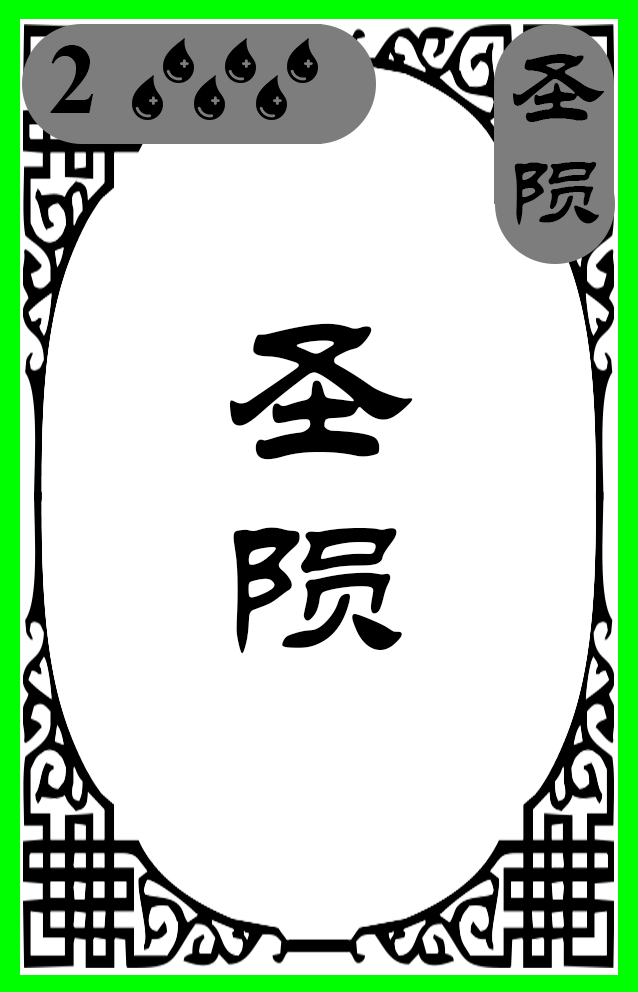
<style>
.page{position:relative;width:638px;height:992px;background:#ffffff}
.page>*{position:absolute;margin:0}
.t1{font:100px "TimesNewRomanPS-BoldMT";color:#000000}
.t2{font:100px "STLiti";color:#000000}
.t3{font:200px "STLiti";color:#000000}
</style>
<div class="page">
<p class="t1" style="left:50px;top:45px;width:43px;height:68px">2</p>
<p class="t2" style="left:513px;top:54px;width:91px;height:171px;text-align:center">圣陨</p>
<p class="t3" style="left:230px;top:323px;width:183px;height:331px">圣陨</p>
</div>
